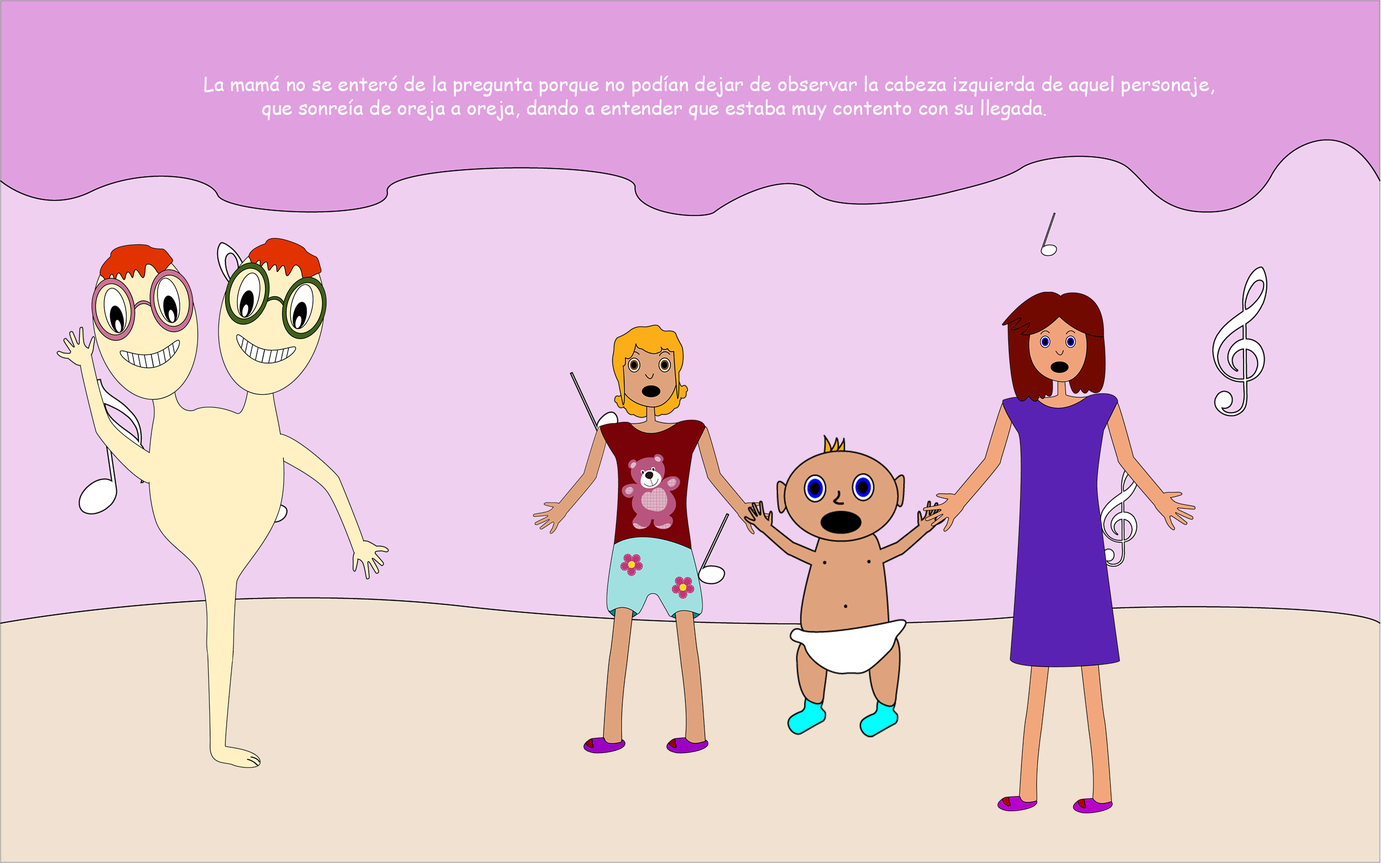
<style>
.page{position:relative;width:1381px;height:863px;background:#efd0f0}
.page>*{position:absolute;margin:0}
.t1{font:19.4px "ComicSansMS";color:#fefefe}
</style>
<div class="page">
<p class="t1" style="left:204px;top:76px;width:1011px;height:45px">La mamá no se enteró de la pregunta porque no podían dejar de observar la cabeza izquierda de aquel personaje, <br>   que sonreía de oreja a oreja, dando a entender que estaba muy contento con su llegada.</p>
</div>
